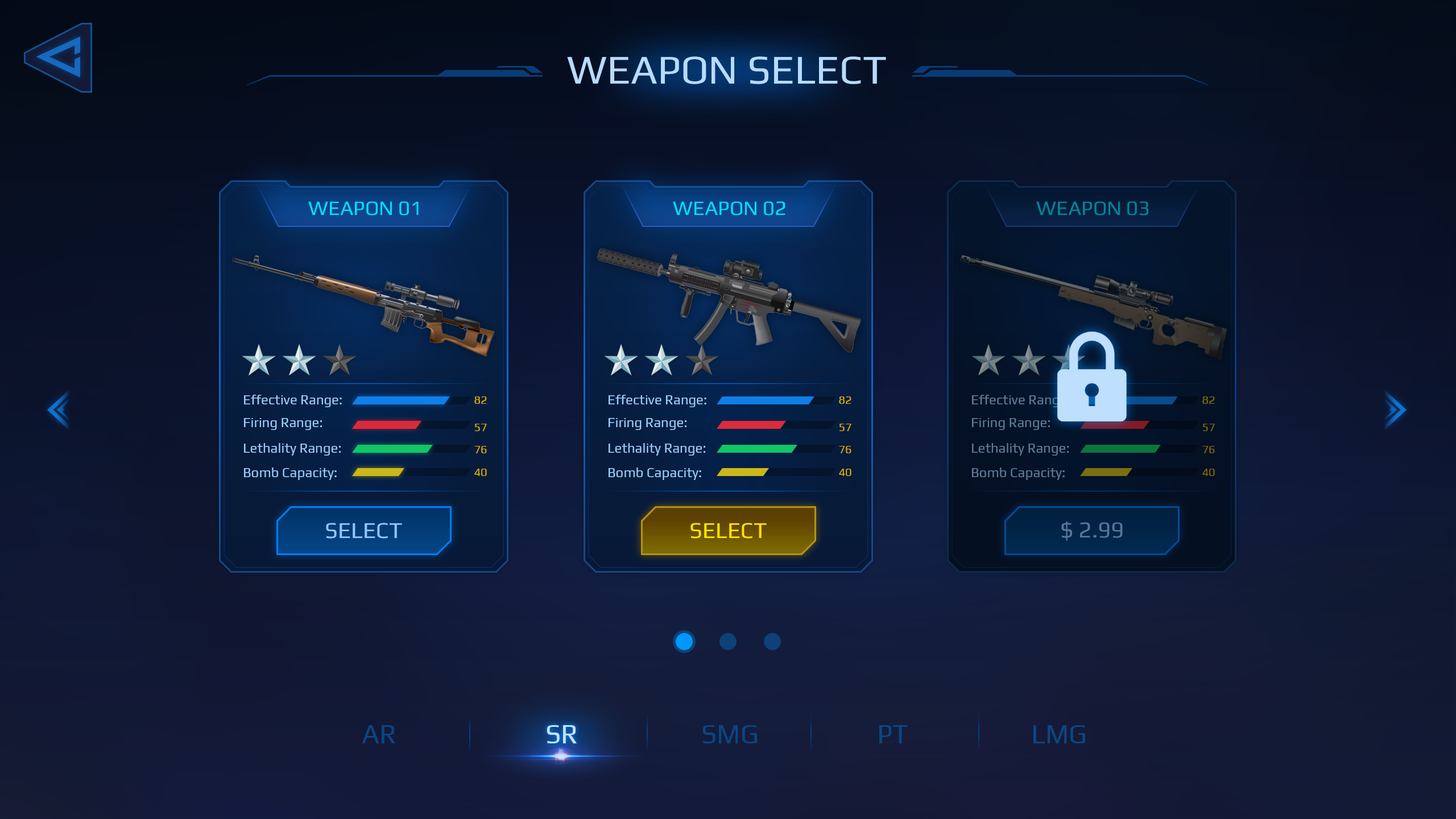
<style>
.page{position:relative;width:1456px;height:819px}
.page>*{position:absolute;margin:0}
.t1{font:40.9px "Play-Regular";color:#b7dbff}
.t2{font:20.5px "Play-Regular";color:#00deff}
.t3{font:20.5px "Play-Regular";color:#008599}
.t4{font:13.6px "Play-Regular";color:#9ccffb}
.t5{font:11.4px "Play-Regular";color:#d9ae00}
.t6{font:13.6px "Play-Regular";color:#5e7c97}
.t7{font:11.4px "Play-Regular";color:#826800}
.t8{font:22.7px "Play-Regular";color:#577699}
.t9{font:22.7px "Play-Regular";color:#91c5ff}
.t10{font:22.7px "Play-Regular";color:#ffe400}
.t11{font:27.3px "Play-Regular";color:#0b4683}
.t12{font:27.3px "Play-Regular";color:#c3e3ff}
</style>
<div class="page">
<p class="t1" style="left:567px;top:56px;width:319px;height:28px">WEAPON SELECT</p>
<p class="t2" style="left:308px;top:201px;width:111px;height:15px">WEAPON 01</p>
<p class="t2" style="left:673px;top:201px;width:112px;height:15px">WEAPON 02</p>
<p class="t3" style="left:1036px;top:201px;width:112px;height:15px">WEAPON 03</p>
<p class="t4" style="left:244px;top:395px;width:98px;height:12px">Effective Range:</p>
<p class="t5" style="left:474px;top:396px;width:13px;height:8px">82</p>
<p class="t4" style="left:609px;top:395px;width:97px;height:12px">Effective Range:</p>
<p class="t5" style="left:839px;top:396px;width:12px;height:8px">82</p>
<p class="t6" style="left:972px;top:395px;width:98px;height:12px">Effective Range:</p>
<p class="t7" style="left:1202px;top:396px;width:13px;height:8px">82</p>
<p class="t4" style="left:244px;top:418px;width:78px;height:12px">Firing Range:</p>
<p class="t5" style="left:475px;top:424px;width:12px;height:7px">57</p>
<p class="t4" style="left:609px;top:418px;width:77px;height:12px">Firing Range:</p>
<p class="t5" style="left:839px;top:424px;width:12px;height:7px">57</p>
<p class="t6" style="left:972px;top:418px;width:78px;height:12px">Firing Range:</p>
<p class="t7" style="left:1203px;top:424px;width:12px;height:7px">57</p>
<p class="t4" style="left:244px;top:443px;width:97px;height:13px">Lethality Range:</p>
<p class="t5" style="left:474px;top:446px;width:13px;height:7px">76</p>
<p class="t4" style="left:609px;top:443px;width:96px;height:13px">Lethality Range:</p>
<p class="t5" style="left:839px;top:446px;width:12px;height:7px">76</p>
<p class="t6" style="left:972px;top:443px;width:97px;height:13px">Lethality Range:</p>
<p class="t7" style="left:1202px;top:446px;width:13px;height:7px">76</p>
<p class="t4" style="left:244px;top:468px;width:93px;height:12px">Bomb Capacity:</p>
<p class="t5" style="left:474px;top:469px;width:13px;height:7px">40</p>
<p class="t4" style="left:609px;top:468px;width:92px;height:12px">Bomb Capacity:</p>
<p class="t5" style="left:839px;top:469px;width:12px;height:7px">40</p>
<p class="t6" style="left:972px;top:468px;width:93px;height:12px">Bomb Capacity:</p>
<p class="t7" style="left:1202px;top:469px;width:13px;height:7px">40</p>
<p class="t8" style="left:1061px;top:521px;width:62px;height:20px">$ 2.99</p>
<p class="t9" style="left:326px;top:523px;width:76px;height:16px">SELECT</p>
<p class="t10" style="left:690px;top:523px;width:77px;height:16px">SELECT</p>
<p class="t11" style="left:362px;top:725px;width:33px;height:18px">AR</p>
<p class="t12" style="left:547px;top:725px;width:30px;height:18px">SR</p>
<p class="t12" style="left:547px;top:725px;width:30px;height:18px">SR</p>
<p class="t11" style="left:702px;top:725px;width:55px;height:18px">SMG</p>
<p class="t11" style="left:879px;top:725px;width:29px;height:18px">PT</p>
<p class="t11" style="left:1033px;top:725px;width:52px;height:18px">LMG</p>
</div>
